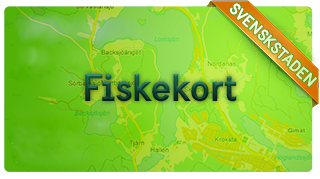
<style>
.page{position:relative;width:320px;height:179px}
.page>*{position:absolute;margin:0}
.t1{font:16.2px "SwedenSans-Bold"}
.t2{font:37.9px "SwedenSans-Bold"}
</style>
<div class="page">
<p class="t1" style="left:229px;top:3px;width:88px;height:84px;rotate:44deg">SVENSKSTADEN</p>
<p class="t2" style="left:85px;top:73px;width:152px;height:29px">Fiskekort</p>
</div>
